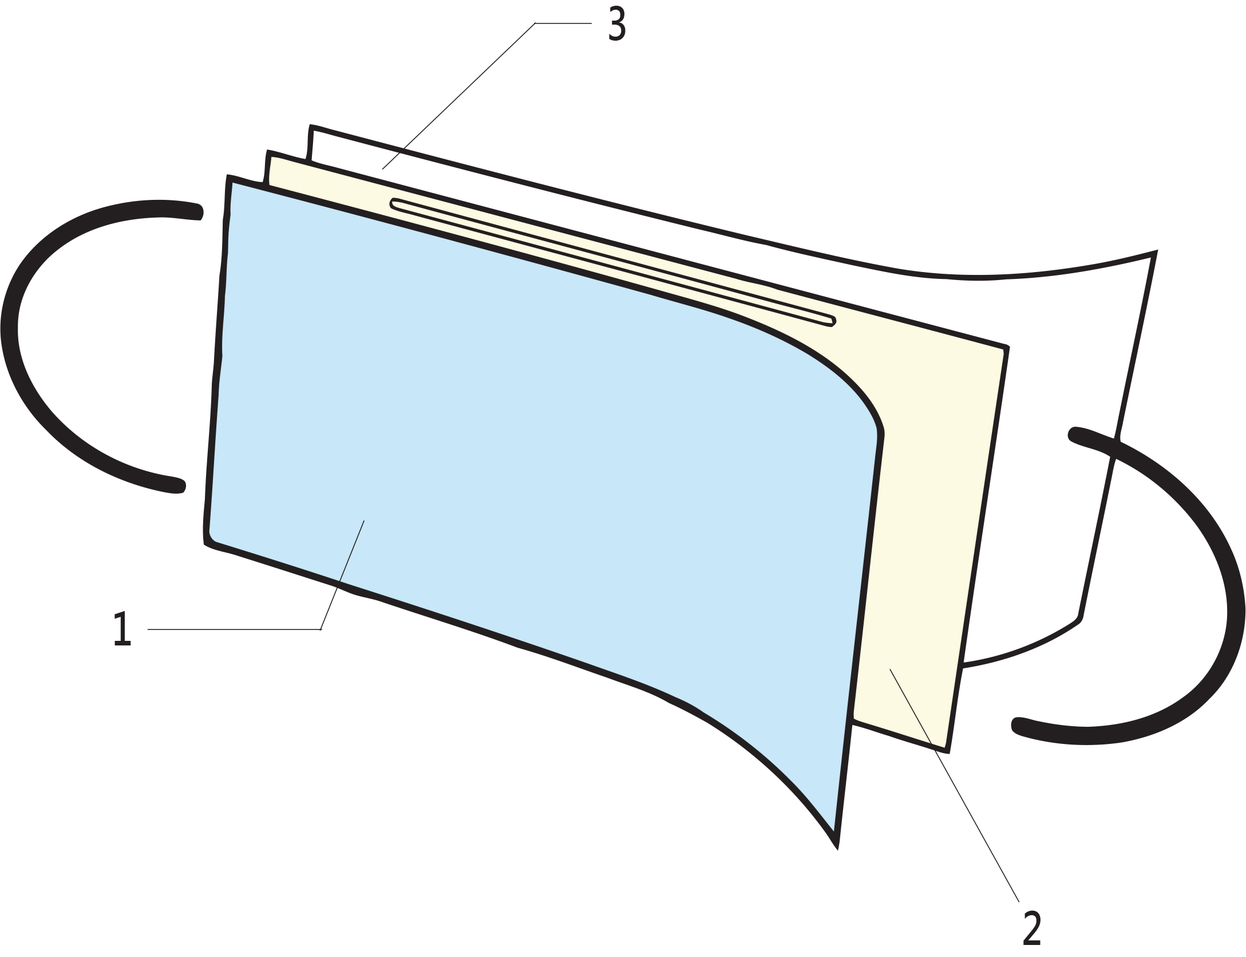
<style>
.page{position:relative;width:1246px;height:957px;background:#ffffff}
.page>*{position:absolute;margin:0}
.t1{font:44.7px "MicrosoftJhengHeiBold";color:#231f20;scale:0.8 1}
</style>
<div class="page">
<p class="t1" style="left:609px;top:6px;width:17px;height:35px">3</p>
<p class="t1" style="left:115px;top:611px;width:16px;height:34px">1</p>
<p class="t1" style="left:1024px;top:910px;width:17px;height:35px">2</p>
</div>
